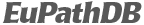
<style>
.page{position:relative;width:144px;height:25px;background:#ffffff}
.page>*{position:absolute;margin:0}
.t1{font:28.9px "PopplLaudatio-Bold";letter-spacing:-0.03em;color:#585858;font-style:italic}
</style>
<div class="page">
<p class="t1" style="left:2px;top:1px;width:140px;height:23px">EuPathDB</p>
</div>
